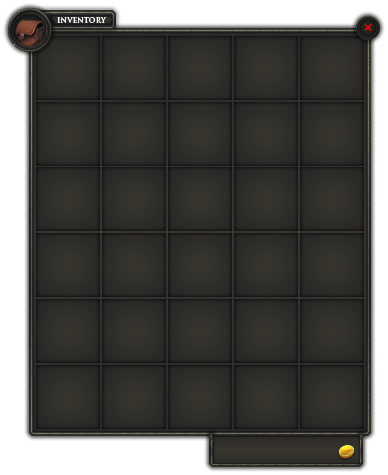
<style>
.page{position:relative;width:388px;height:475px}
.page>*{position:absolute;margin:0}
.t1{font:8px "TrajanPro-Bold";color:#fefefe}
</style>
<div class="page">
<p class="t1" style="left:57px;top:17px;width:50px;height:6px">Inventory</p>
</div>
